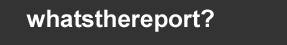
<style>
.page{position:relative;width:287px;height:45px;background:#333333}
.page>*{position:absolute;margin:0}
.t1{font:24px "Arial-BoldMT";color:#ffffff}
</style>
<div class="page">
<p class="t1" style="left:26px;top:9px;width:188px;height:23px">whatsthereport?</p>
</div>
